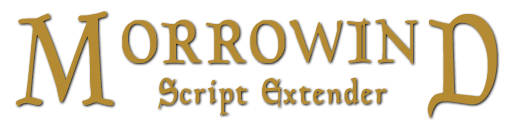
<style>
.page{position:relative;width:512px;height:128px;background:#ffffff}
.page>*{position:absolute;margin:0}
.t1{font:128px "Planewalker";letter-spacing:0.05em;color:#b48b32;scale:0.85 1}
.t2{font:60px "Planewalker";letter-spacing:0.05em;color:#b48b32;scale:0.85 1}
.t3{font:36px "Planewalker";letter-spacing:0.05em;color:#b48b32;scale:0.85 1}
</style>
<div class="page">
<p class="t1" style="left:15px;top:11px;width:482px;height:107px">M       D</p>
<p class="t2" style="left:122px;top:18px;width:296px;height:46px">ORROWIN</p>
<p class="t3" style="left:158px;top:77px;width:229px;height:38px">Script Extender</p>
</div>
